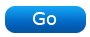
<style>
.page{position:relative;width:90px;height:37px;background:#ffffff}
.page>*{position:absolute;margin:0}
.t1{font:18px "Verdana";color:#fffdfd}
</style>
<div class="page">
<p class="t1" style="left:32px;top:12px;width:25px;height:13px">Go</p>
</div>
